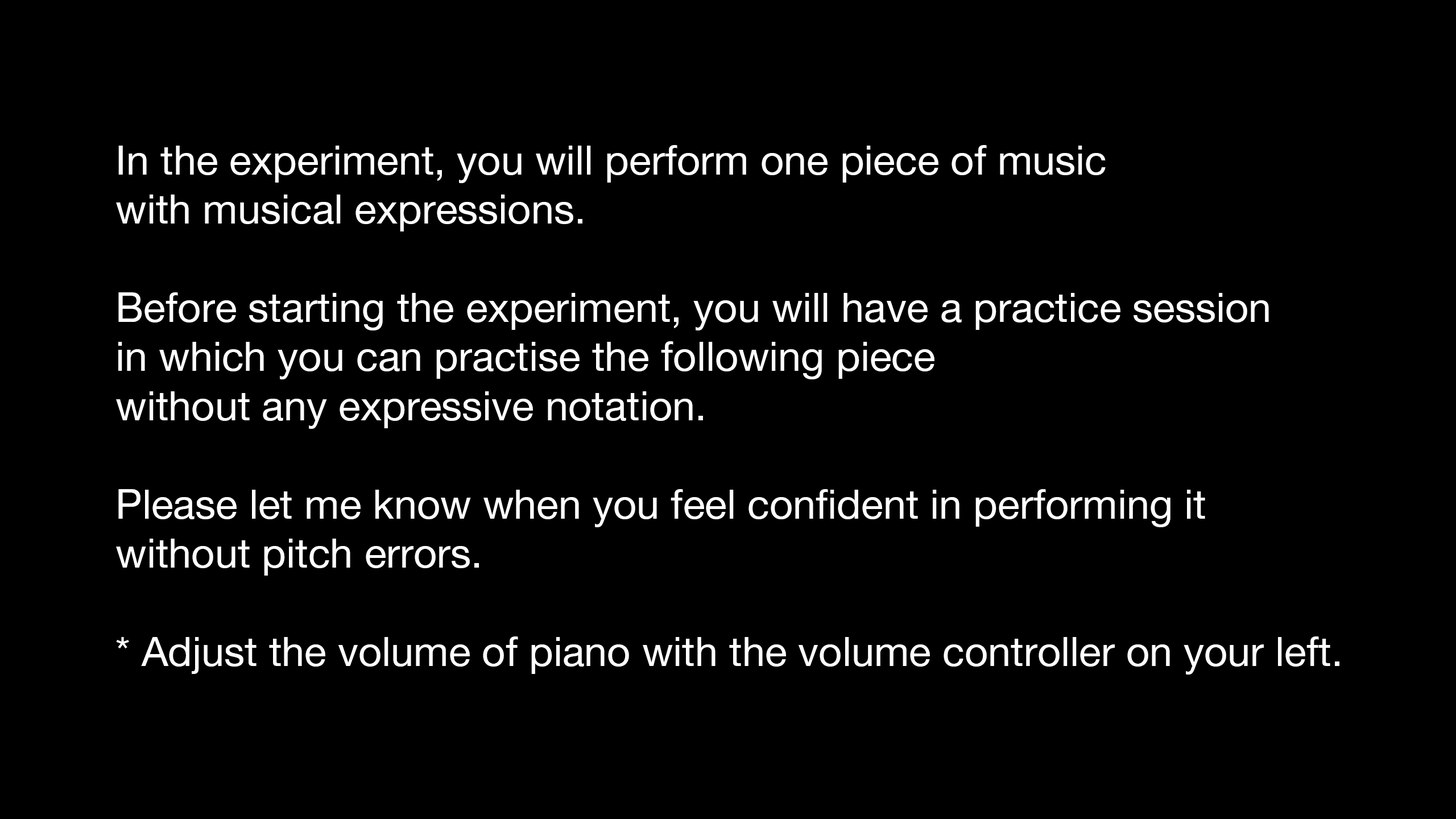
<style>
.page{position:relative;width:1456px;height:819px;background:#000000}
.page>*{position:absolute;margin:0}
.t1{font:40.9px "HelveticaNeue";color:#ffffff}
</style>
<div class="page">
<p class="t1" style="left:116px;top:145px;width:1223px;height:530px">In the experiment, you will perform one piece of music<br>with musical expressions.<br><br>Before starting the experiment, you will have a practice session<br>in which you can practise the following piece<br>without any expressive notation.<br><br>Please let me know when you feel confident in performing it<br>without pitch errors.<br><br>* Adjust the volume of piano with the volume controller on your left.</p>
</div>
